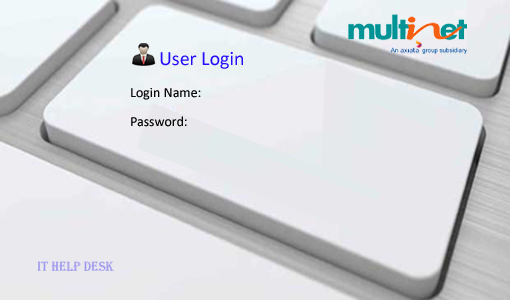
<style>
.page{position:relative;width:510px;height:300px}
.page>*{position:absolute;margin:0}
.t1{font:20px "Calibri";color:#230dfb}
.t2{font:14px "Calibri";color:#0a0a0a}
.t3{font:14px "Calibri";color:#060606}
.t4{font:14px "Algerian";color:#9f98ef;scale:0.88 1}
</style>
<div class="page">
<p class="t1" style="left:160px;top:52px;width:83px;height:17px">User Login</p>
<p class="t2" style="left:131px;top:88px;width:70px;height:12px">Login Name:</p>
<p class="t3" style="left:131px;top:116px;width:56px;height:11px">Password:</p>
<p class="t4" style="left:37px;top:261px;width:77px;height:10px">IT Help desk</p>
</div>
